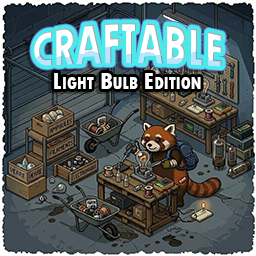
<style>
.page{position:relative;width:256px;height:256px}
.page>*{position:absolute;margin:0}
.t1{font:47px "TwCenMT-CondensedExtraBold";color:#ffffff;text-transform:uppercase}
.t2{font:47px "TwCenMT-CondensedExtraBold";color:#ffffff;font-variant:small-caps}
.t3{font:25px "TwCenMT-CondensedExtraBold";color:#ffffff;font-variant:small-caps}
</style>
<div class="page">
<p class="t1" style="left:34px;top:23px;width:188px;height:44px"><span class="t2">C</span>raftable</p>
<p class="t3" style="left:54px;top:73px;width:147px;height:16px">Light Bulb Edition</p>
</div>
